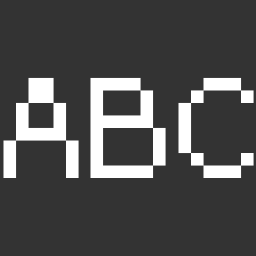
<style>
.page{position:relative;width:256px;height:256px;background:#333333}
.page>*{position:absolute;margin:0}
.t1{font:200px "ProggyCleanTT";color:#ffffff}
</style>
<div class="page">
<p class="t1" style="left:3px;top:77px;width:251px;height:101px">ABC</p>
</div>
